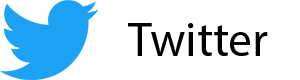
<style>
.page{position:relative;width:300px;height:80px;background:#ffffff}
.page>*{position:absolute;margin:0}
.t1{font:48px "MyriadPro-Regular";color:#000000}
</style>
<div class="page">
<p class="t1" style="left:128px;top:23px;width:140px;height:33px">Twitter</p>
</div>
